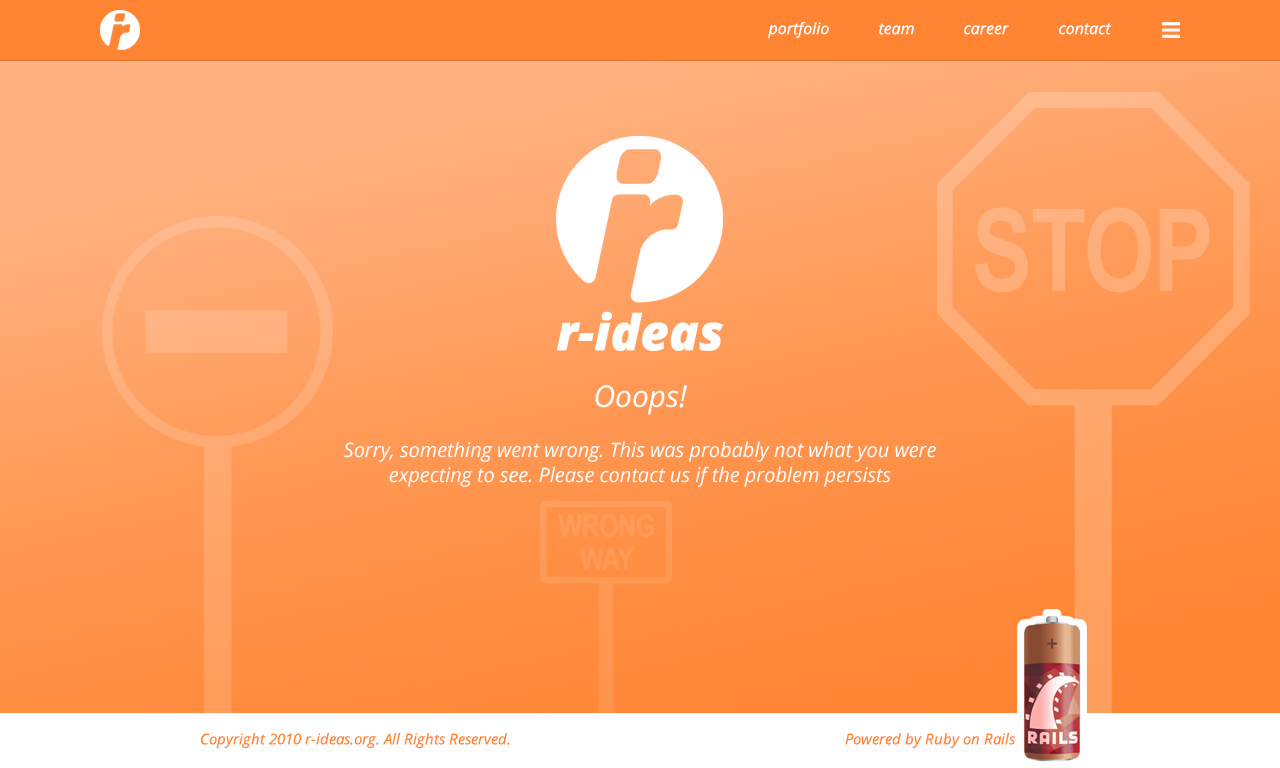
<style>
.page{position:relative;width:1280px;height:768px}
.page>*{position:absolute;margin:0}
.t1{font:16px "OpenSans-Italic";color:#fefefe}
.t2{font:20px/25px "OpenSans-Italic";color:#fefefe}
.t3{font:30px/25px "OpenSans-Italic";color:#fefefe}
.t4{font:15px "OpenSans-Italic";color:#ff8533}
</style>
<div class="page">
<p class="t1" style="left:768px;top:21px;width:61px;height:18px">portfolio</p>
<p class="t1" style="left:879px;top:23px;width:35px;height:12px">team</p>
<p class="t1" style="left:964px;top:25px;width:45px;height:10px">career</p>
<p class="t1" style="left:1059px;top:23px;width:53px;height:12px">contact</p>
<p class="t2" style="left:344px;top:385px;width:592px;height:102px;text-align:center"><span class="t3">Ooops!<br><br></span>Sorry, something went wrong. This was probably not what you were expecting to see. Please contact us if the problem persists</p>
<p class="t4" style="left:201px;top:733px;width:309px;height:16px">Copyright 2010 r-ideas.org. All Rights Reserved.</p>
<p class="t4" style="left:845px;top:733px;width:171px;height:16px">Powered by Ruby on Rails</p>
</div>
